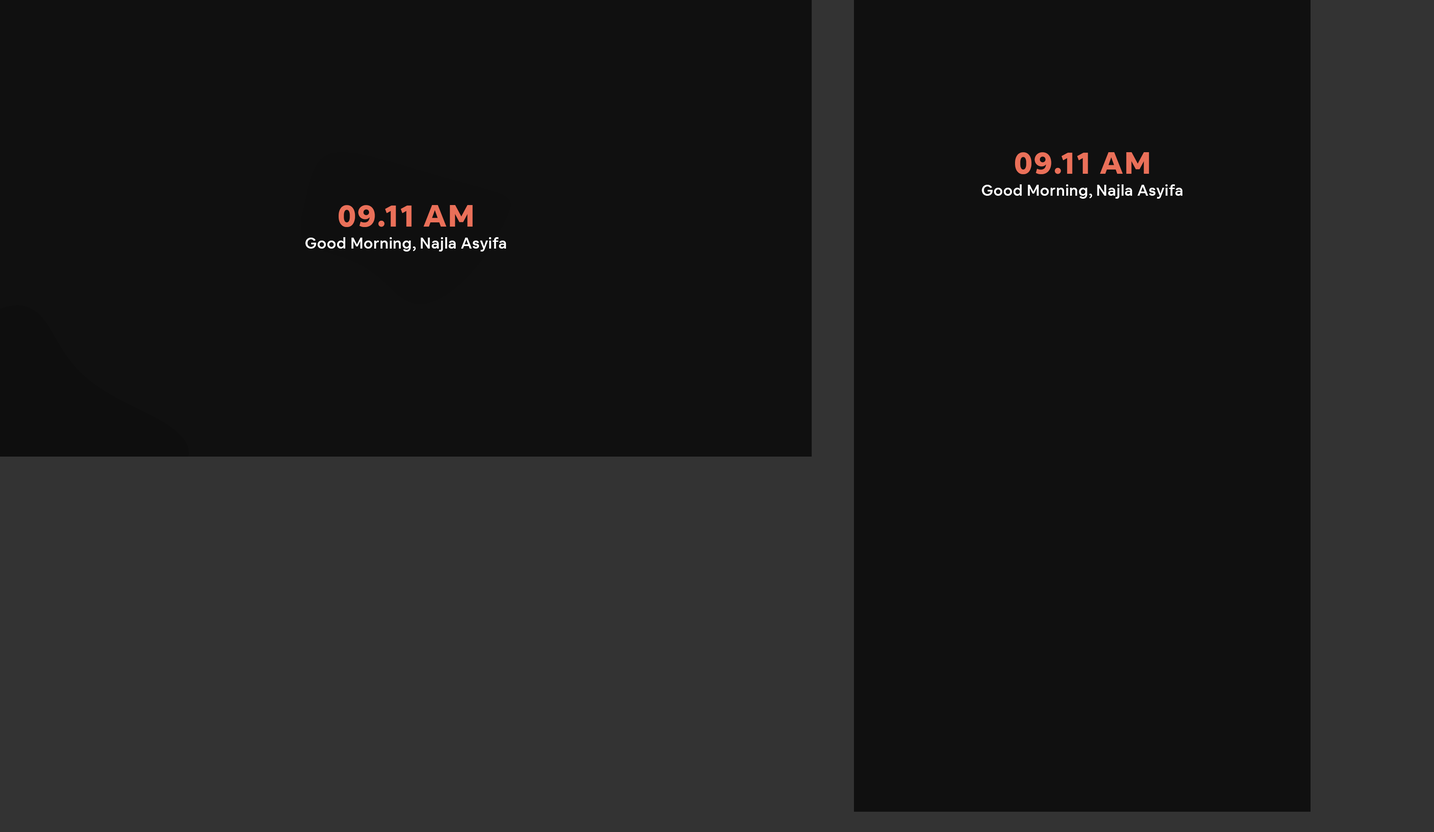
<style>
.page{position:relative;width:1434px;height:832px;background:#101010}
.page>*{position:absolute;margin:0}
.t1{font:30.4px "AirbnbCerealApp-ExtraBold";letter-spacing:0.05em;color:#ea7059}
.t2{font:15.2px "AirbnbCerealApp-Medium";letter-spacing:0.025em;color:#ffffff}
</style>
<div class="page">
<p class="t1" style="left:1015px;top:152px;width:134px;height:22px">09.11 AM</p>
<p class="t2" style="left:981px;top:184px;width:201px;height:15px">Good Morning, Najla Asyifa</p>
<p class="t1" style="left:339px;top:205px;width:134px;height:22px">09.11 AM</p>
<p class="t2" style="left:305px;top:237px;width:201px;height:14px">Good Morning, Najla Asyifa</p>
</div>
